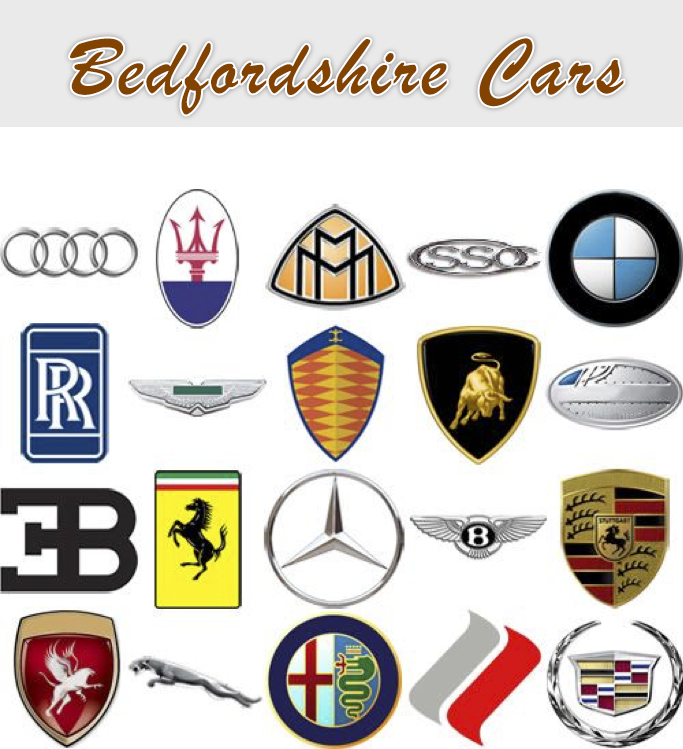
<style>
.page{position:relative;width:683px;height:749px;background:#ffffff}
.page>*{position:absolute;margin:0}
.t1{font:84.2px "BrushScriptMT";letter-spacing:0.04em;color:#824300}
</style>
<div class="page">
<p class="t1" style="left:70px;top:38px;width:554px;height:77px">Bedfordshire Cars</p>
</div>
